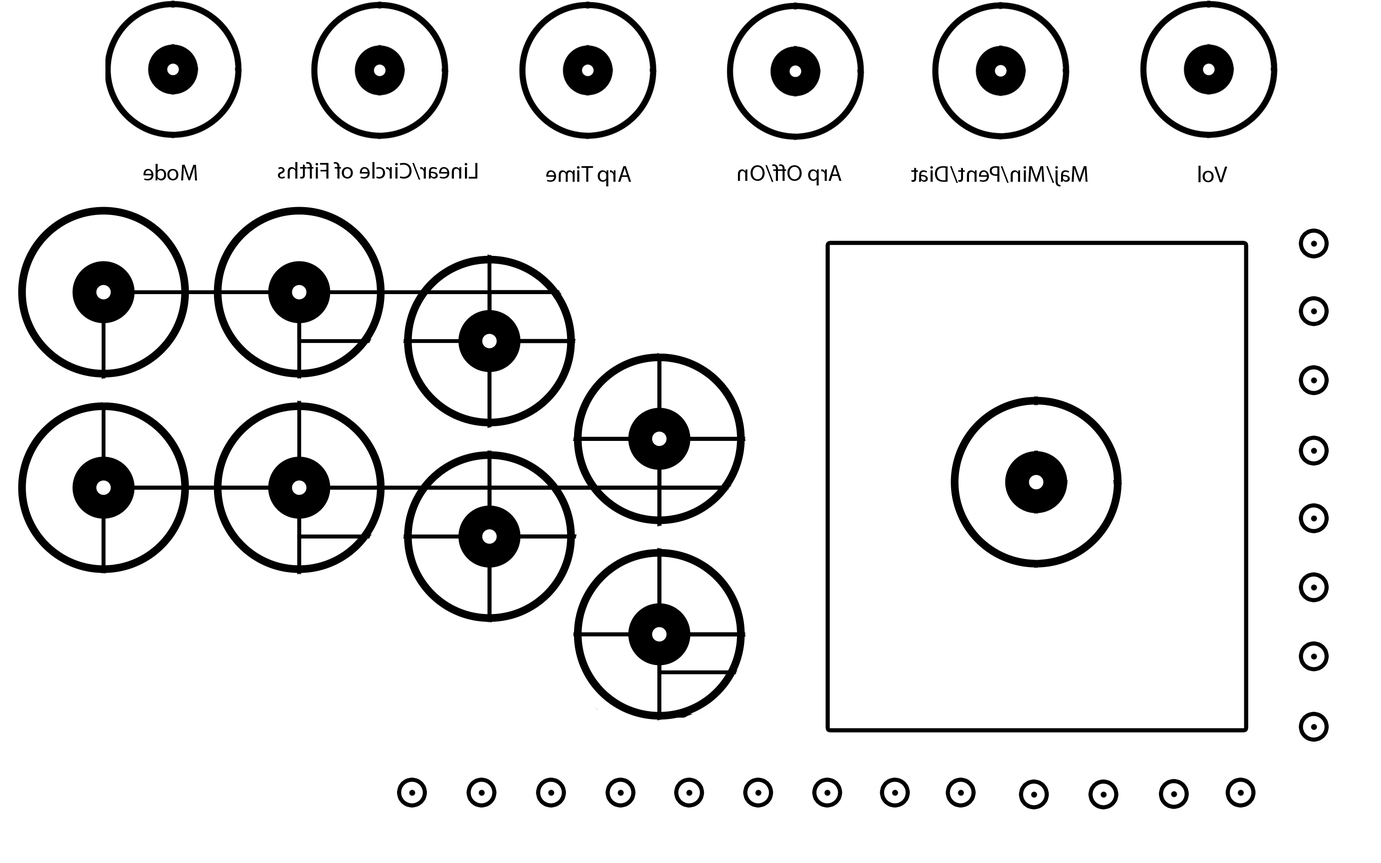
<style>
.page{position:relative;width:1381px;height:863px;background:#ffffff}
.page>*{position:absolute;margin:0}
.t1{font:23px "MyriadPro-Regular";color:#000000}
</style>
<div class="page">
<p class="t1" style="left:143px;top:164px;width:54px;height:16px;rotate:180deg">Mode</p>
<p class="t1" style="left:278px;top:162px;width:199px;height:18px;rotate:180deg">Linear/Circle of Fifths</p>
<p class="t1" style="left:546px;top:166px;width:85px;height:20px;rotate:180deg">Arp Time</p>
<p class="t1" style="left:738px;top:164px;width:104px;height:22px;rotate:180deg">Arp Off/On</p>
<p class="t1" style="left:911px;top:166px;width:177px;height:21px;rotate:180deg">Maj/Min/Pent/Diat</p>
<p class="t1" style="left:1198px;top:166px;width:29px;height:16px;rotate:180deg">Vol</p>
</div>
